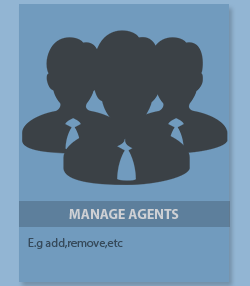
<style>
.page{position:relative;width:250px;height:286px;background:#719bbe}
.page>*{position:absolute;margin:0}
.t1{font:14px "MyriadPro-Bold";color:#e0dddd}
.t2{font:12px "MyriadPro-Regular";color:#364a5b}
</style>
<div class="page">
<p class="t1" style="left:69px;top:209px;width:110px;height:10px;opacity:0.86">MANAGE AGENTS</p>
<p class="t2" style="left:28px;top:238px;width:95px;height:11px">E.g add,remove,etc</p>
</div>
